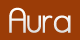
<style>
.page{position:relative;width:80px;height:40px;background:#9b3c07}
.page>*{position:absolute;margin:0}
.t1{font:40px "Asenine";color:#ffffff;font-weight:bold}
</style>
<div class="page">
<p class="t1" style="left:9px;top:7px;width:62px;height:26px">Aura</p>
</div>
